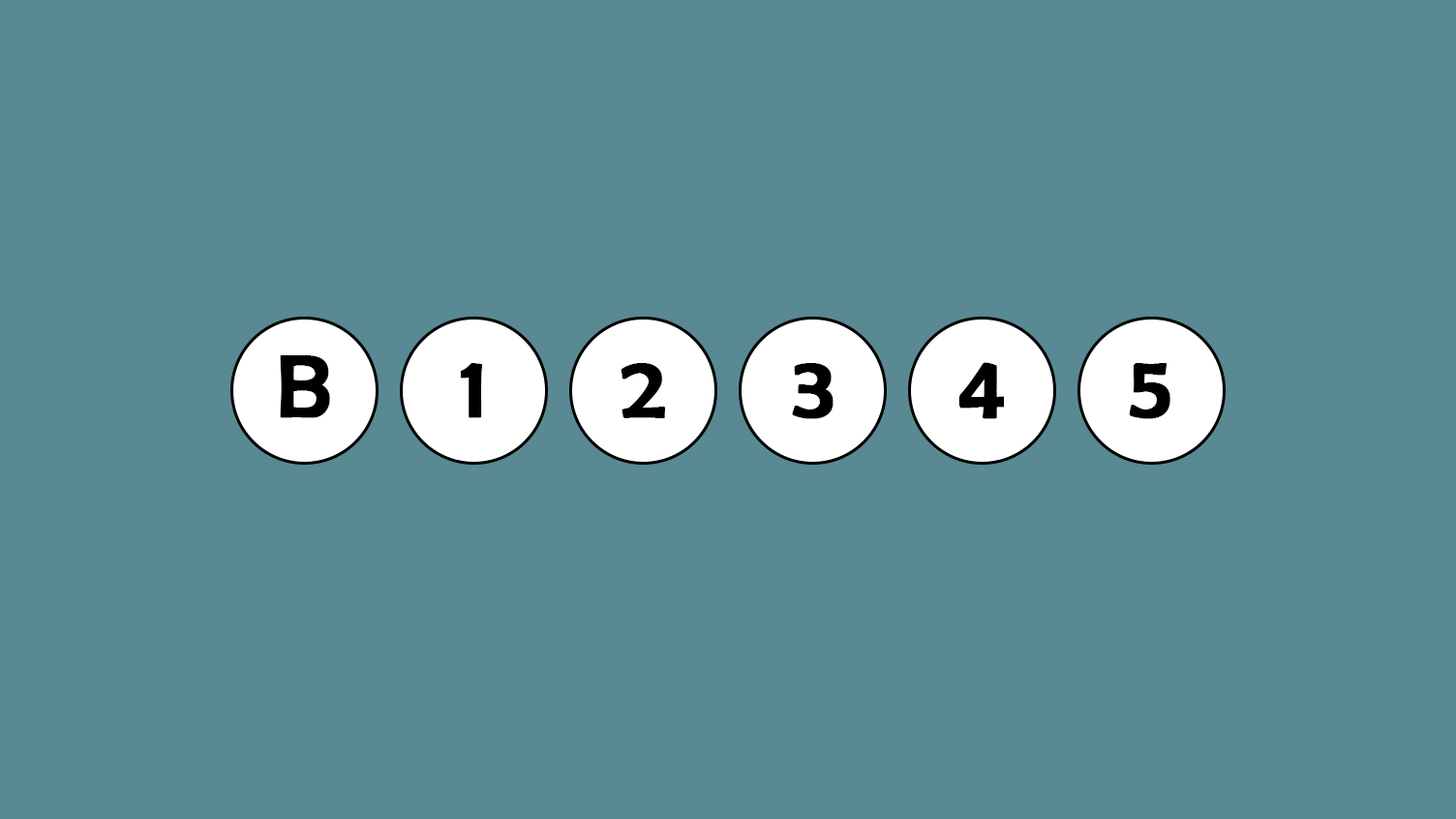
<style>
.page{position:relative;width:1456px;height:819px;background:#598992}
.page>*{position:absolute;margin:0}
.t1{font:89.1px "BerlinSansFB-Reg";color:#000000;font-weight:bold}
</style>
<div class="page">
<p class="t1" style="left:280px;top:355px;width:50px;height:63px">B</p>
<p class="t1" style="left:460px;top:363px;width:23px;height:55px">1</p>
<p class="t1" style="left:621px;top:363px;width:44px;height:55px">2</p>
<p class="t1" style="left:792px;top:363px;width:42px;height:56px">3</p>
<p class="t1" style="left:958px;top:362px;width:46px;height:57px">4</p>
<p class="t1" style="left:1129px;top:363px;width:41px;height:56px">5</p>
</div>
